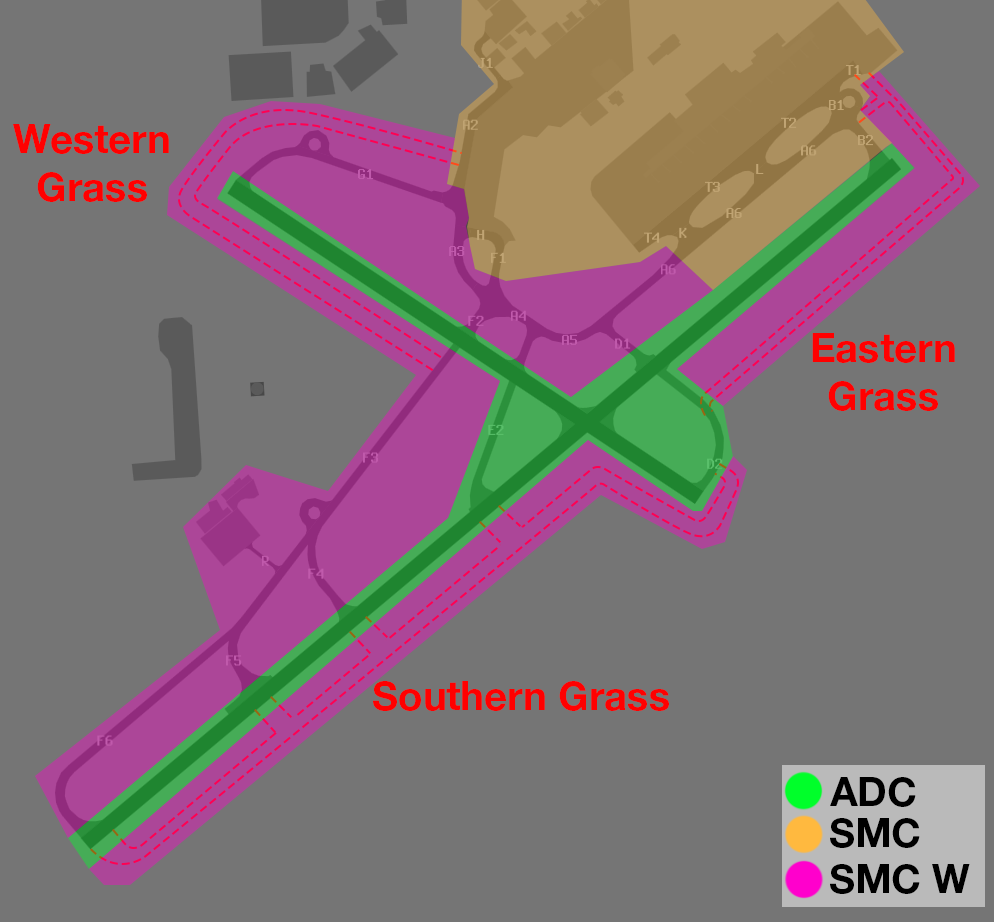
<style>
.page{position:relative;width:994px;height:922px;background:#757575}
.page>*{position:absolute;margin:0}
.t1{font:40px "HelveticaNeueLTStd-Bd";color:#ff0000}
.t2{font:40px "HelveticaNeueLTStd-Bd";color:#000000}
</style>
<div class="page">
<p class="t1" style="left:13px;top:124px;width:156px;height:78px;text-align:center">Western<br>Grass</p>
<p class="t1" style="left:812px;top:333px;width:143px;height:78px;text-align:center">Eastern<br>Grass</p>
<p class="t1" style="left:373px;top:681px;width:296px;height:30px">Southern Grass</p>
<p class="t2" style="left:830px;top:777px;width:86px;height:30px">ADC</p>
<p class="t2" style="left:830px;top:818px;width:90px;height:30px">SMC</p>
<p class="t2" style="left:830px;top:864px;width:140px;height:30px">SMC W</p>
</div>
